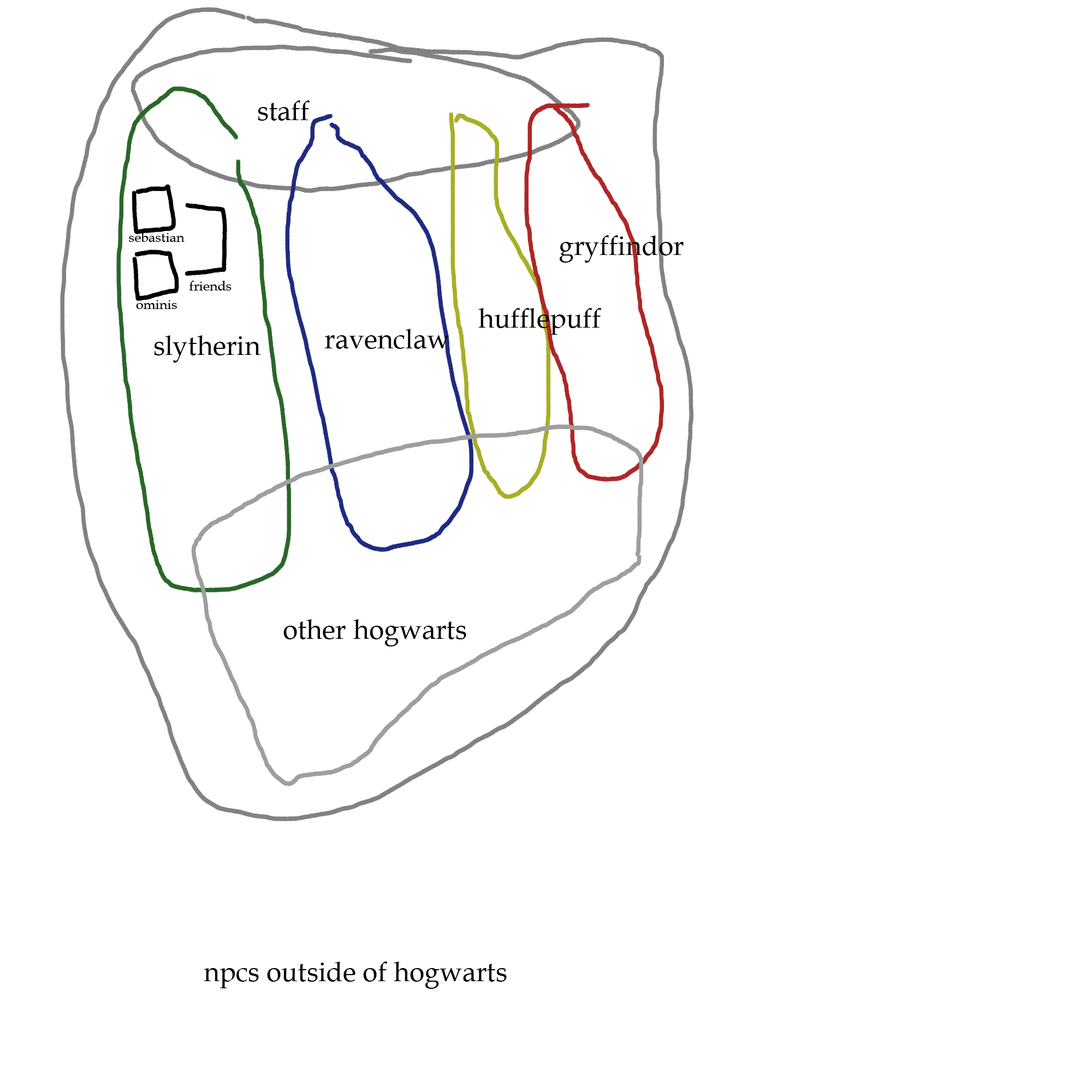
<style>
.page{position:relative;width:1092px;height:1092px;background:#ffffff}
.page>*{position:absolute;margin:0}
.t1{font:27.3px "BookAntiqua";color:#000000}
.t2{font:13.6px "BookAntiqua";color:#000000}
</style>
<div class="page">
<p class="t1" style="left:258px;top:100px;width:52px;height:21px">staff</p>
<p class="t2" style="left:129px;top:232px;width:56px;height:10px">sebastian</p>
<p class="t1" style="left:560px;top:235px;width:124px;height:28px">gryffindor</p>
<p class="t2" style="left:189px;top:281px;width:43px;height:9px">friends</p>
<p class="t2" style="left:136px;top:300px;width:41px;height:9px">ominis</p>
<p class="t1" style="left:478px;top:308px;width:123px;height:27px">hufflepuff</p>
<p class="t1" style="left:324px;top:329px;width:125px;height:20px">ravenclaw</p>
<p class="t1" style="left:154px;top:335px;width:106px;height:28px">slytherin</p>
<p class="t1" style="left:283px;top:619px;width:183px;height:27px">other hogwarts</p>
<p class="t1" style="left:204px;top:961px;width:303px;height:28px">npcs outside of hogwarts</p>
</div>
